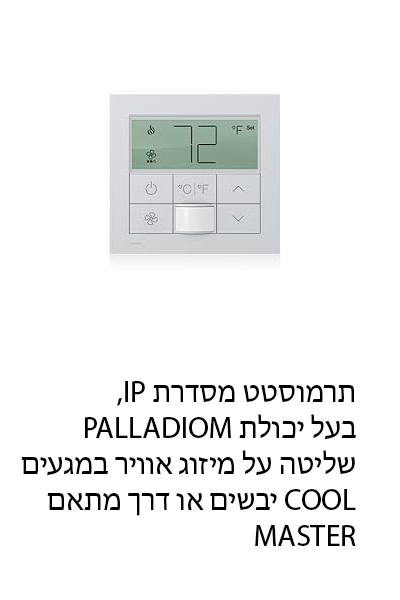
<style>
.page{position:relative;width:400px;height:600px;background:#ffffff}
.page>*{position:absolute;margin:0}
.t1{font:30px "MyriadHebrew-Regular";color:#000000}
</style>
<div class="page">
<p class="t1" style="left:21px;top:381px;width:335px;height:165px;text-align:right">,IP תרמוסטט מסדרת<br>PALLADIOM בעל יכולת<br>שליטה על מיזוג אוויר במגעים<br>יבשים או דרך מתאם COOL<br>MASTER</p>
</div>
